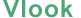
<style>
.page{position:relative;width:81px;height:18px;background:#ffffff}
.page>*{position:absolute;margin:0}
.t1{font:24px "Arial-BoldMT";letter-spacing:0.05em;color:#4ba575}
</style>
<div class="page">
<p class="t1" style="left:3px;top:0px;width:70px;height:18px">Vlook</p>
</div>
